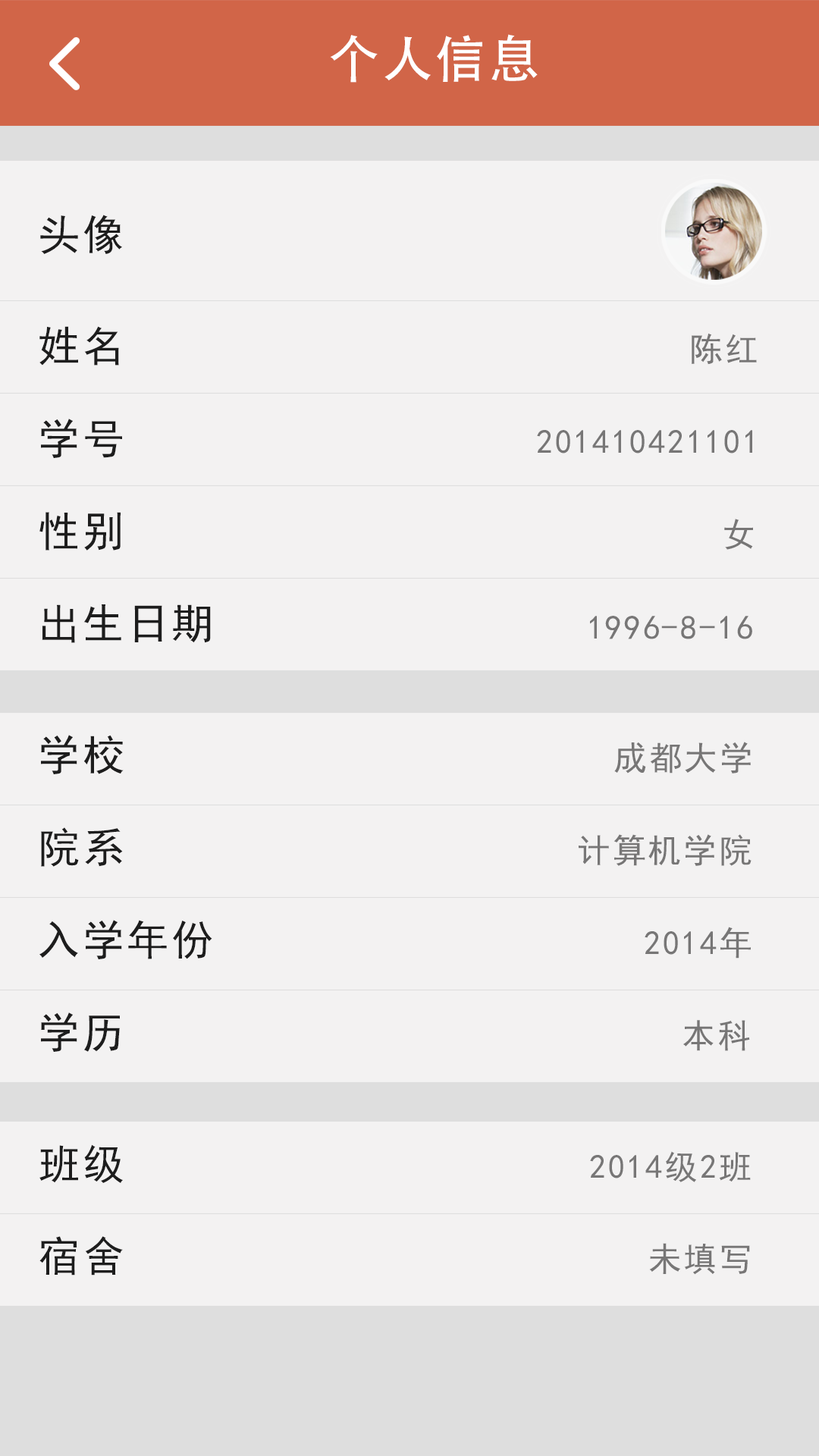
<style>
.page{position:relative;width:819px;height:1456px;background:#f3f2f2}
.page>*{position:absolute;margin:0}
.t1{font:50.8px "AdobeHeitiStd-Regular";letter-spacing:0.06em;color:#ffffff}
.t2{font:41.8px "SimHei";letter-spacing:0.06em;color:#1d1d1d}
.t3{font:33.5px "SimHei";letter-spacing:0.06em;color:#777676}
</style>
<div class="page">
<p class="t1" style="left:330px;top:34px;width:208px;height:49px">个人信息</p>
<p class="t2" style="left:40px;top:215px;width:82px;height:39px">头像</p>
<p class="t2" style="left:39px;top:326px;width:80px;height:40px">姓名</p>
<p class="t3" style="left:692px;top:333px;width:65px;height:32px">陈红</p>
<p class="t2" style="left:41px;top:419px;width:81px;height:39px">学号</p>
<p class="t3" style="left:537px;top:430px;width:215px;height:23px">201410421101</p>
<p class="t2" style="left:39px;top:512px;width:82px;height:39px">性别</p>
<p class="t3" style="left:724px;top:519px;width:29px;height:31px">女</p>
<p class="t2" style="left:42px;top:604px;width:169px;height:39px">出生日期</p>
<p class="t3" style="left:590px;top:616px;width:162px;height:23px">1996-8-16</p>
<p class="t2" style="left:41px;top:735px;width:83px;height:39px">学校</p>
<p class="t3" style="left:614px;top:742px;width:137px;height:31px">成都大学</p>
<p class="t2" style="left:41px;top:827px;width:82px;height:40px">院系</p>
<p class="t3" style="left:579px;top:834px;width:172px;height:32px">计算机学院</p>
<p class="t2" style="left:39px;top:920px;width:173px;height:39px">入学年份</p>
<p class="t3" style="left:645px;top:927px;width:106px;height:32px">2014年</p>
<p class="t2" style="left:41px;top:1012px;width:79px;height:40px">学历</p>
<p class="t3" style="left:683px;top:1020px;width:67px;height:31px">本科</p>
<p class="t2" style="left:39px;top:1144px;width:84px;height:39px">班级</p>
<p class="t3" style="left:590px;top:1151px;width:161px;height:31px">2014级2班</p>
<p class="t2" style="left:39px;top:1236px;width:84px;height:39px">宿舍</p>
<p class="t3" style="left:649px;top:1243px;width:101px;height:32px">未填写</p>
</div>
